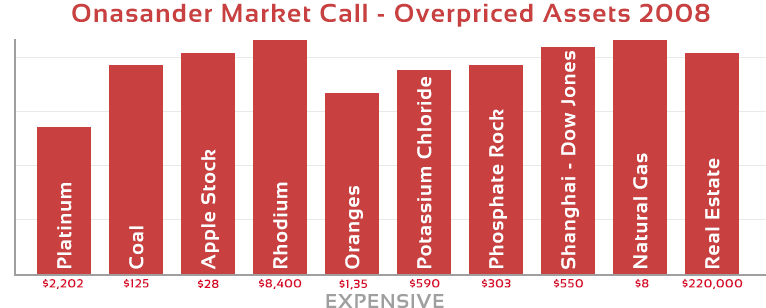
<style>
.page{position:relative;width:766px;height:308px;background:#c84040}
.page>*{position:absolute;margin:0}
.t1{font:26px "Sansation-Bold";letter-spacing:0.05em;color:#c84040}
.t2{font:20px "Sansation-Bold";letter-spacing:0.05em;color:#ffffff}
.t3{font:12px "Sansation-Bold";letter-spacing:0.05em;color:#d7082a}
.t4{font:20px "Sansation-Bold";letter-spacing:0.05em;color:#9f9fa0}
</style>
<div class="page">
<p class="t1" style="left:72px;top:3px;width:638px;height:24px">Onasander Market Call - Overpriced Assets 2008</p>
<p class="t2" style="left:561px;top:51px;width:18px;height:218px;rotate:-90deg">Shanghai - Dow Jones</p>
<p class="t2" style="left:417px;top:77px;width:15px;height:191px;rotate:-90deg">Potassium Chloride</p>
<p class="t2" style="left:489px;top:109px;width:18px;height:159px;rotate:-90deg">Phosphate Rock</p>
<p class="t2" style="left:201px;top:149px;width:18px;height:121px;rotate:-90deg">Apple Stock</p>
<p class="t2" style="left:633px;top:153px;width:15px;height:115px;rotate:-90deg">Natural Gas</p>
<p class="t2" style="left:705px;top:158px;width:15px;height:110px;rotate:-90deg">Real Estate</p>
<p class="t2" style="left:57px;top:183px;width:15px;height:85px;rotate:-90deg">Platinum</p>
<p class="t2" style="left:273px;top:182px;width:15px;height:86px;rotate:-90deg">Rhodium</p>
<p class="t2" style="left:345px;top:186px;width:18px;height:83px;rotate:-90deg">Oranges</p>
<p class="t2" style="left:129px;top:226px;width:15px;height:43px;rotate:-90deg">Coal</p>
<p class="t3" style="left:43px;top:279px;width:40px;height:10px">$2,202</p>
<p class="t3" style="left:124px;top:279px;width:25px;height:9px">$125</p>
<p class="t3" style="left:198px;top:279px;width:21px;height:9px">$28</p>
<p class="t3" style="left:259px;top:279px;width:43px;height:10px">$8,400</p>
<p class="t3" style="left:339px;top:279px;width:28px;height:11px">$1,35</p>
<p class="t3" style="left:410px;top:279px;width:30px;height:9px">$590</p>
<p class="t3" style="left:482px;top:279px;width:29px;height:9px">$303</p>
<p class="t3" style="left:554px;top:279px;width:29px;height:9px">$550</p>
<p class="t3" style="left:635px;top:279px;width:14px;height:9px">$8</p>
<p class="t3" style="left:682px;top:279px;width:61px;height:10px">$220,000</p>
<p class="t4" style="left:326px;top:294px;width:118px;height:14px">EXPENSIVE</p>
</div>
